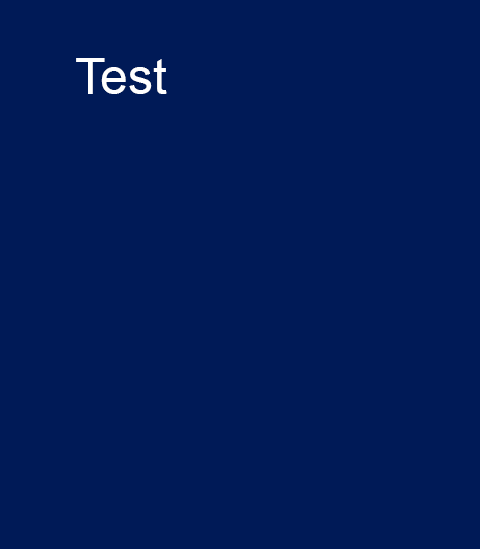
<style>
.page{position:relative;width:480px;height:549px;background:#001a57}
.page>*{position:absolute;margin:0}
.t1{font:50px "ArialMT";color:#ffffff}
</style>
<div class="page">
<p class="t1" style="left:76px;top:58px;width:91px;height:36px">Test</p>
</div>
